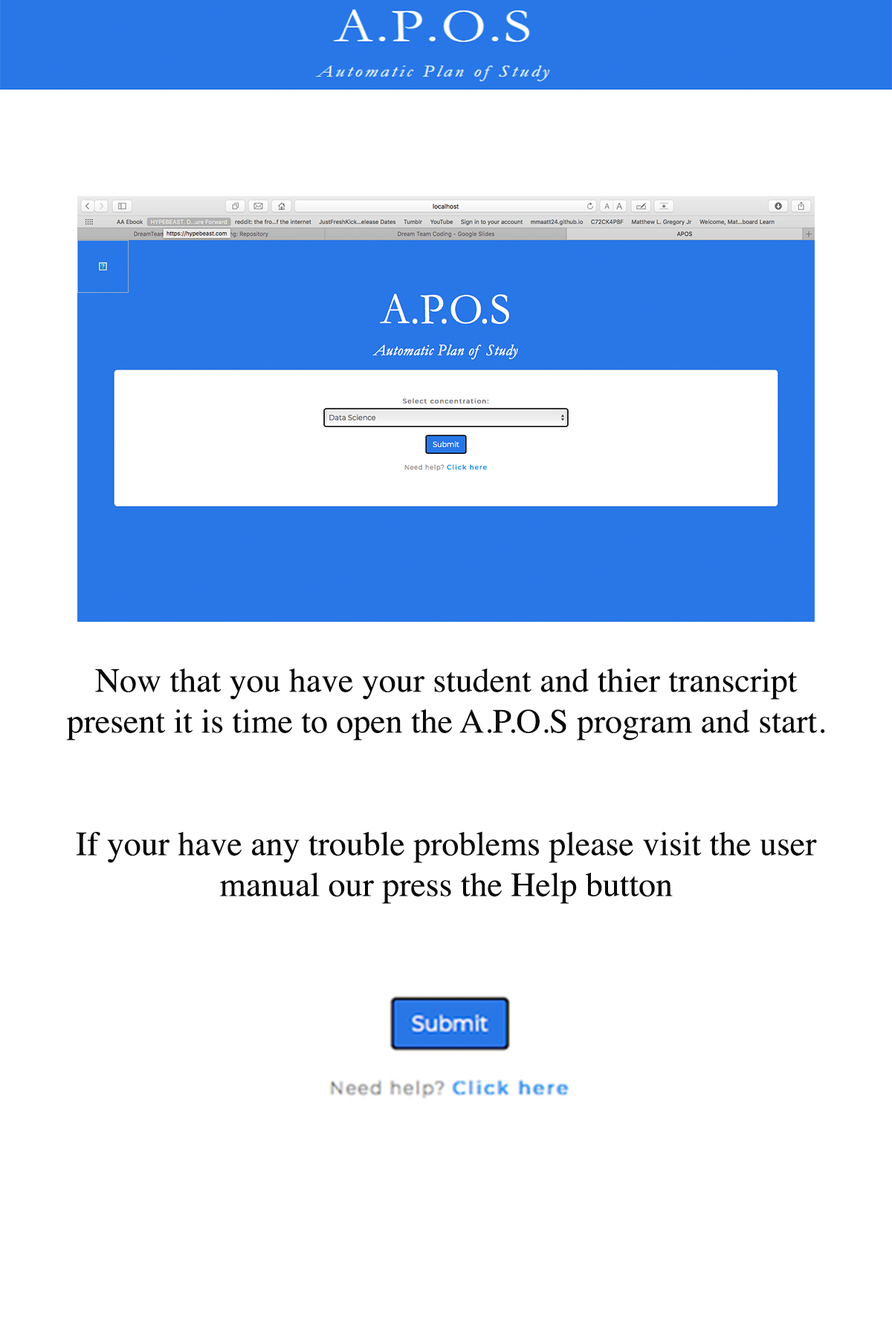
<style>
.page{position:relative;width:892px;height:1337px;background:#ffffff}
.page>*{position:absolute;margin:0}
.t1{font:34.1px "Times-Roman";color:#0a0a0a}
</style>
<div class="page">
<p class="t1" style="left:66px;top:669px;width:759px;height:235px;text-align:center">Now that you have your student and thier transcript present it is time to open the A.P.O.S program and start. <br><br><br>If your have any trouble problems please visit the user manual our press the Help button</p>
</div>
